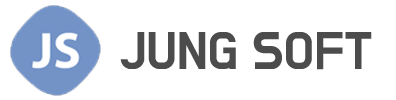
<style>
.page{position:relative;width:396px;height:100px;background:#ffffff}
.page>*{position:absolute;margin:0}
.t1{font:43.6px "BMDoHyeon";color:#4c4c4c}
</style>
<div class="page">
<p class="t1" style="left:120px;top:32px;width:252px;height:38px">JUNG SOFT</p>
</div>
